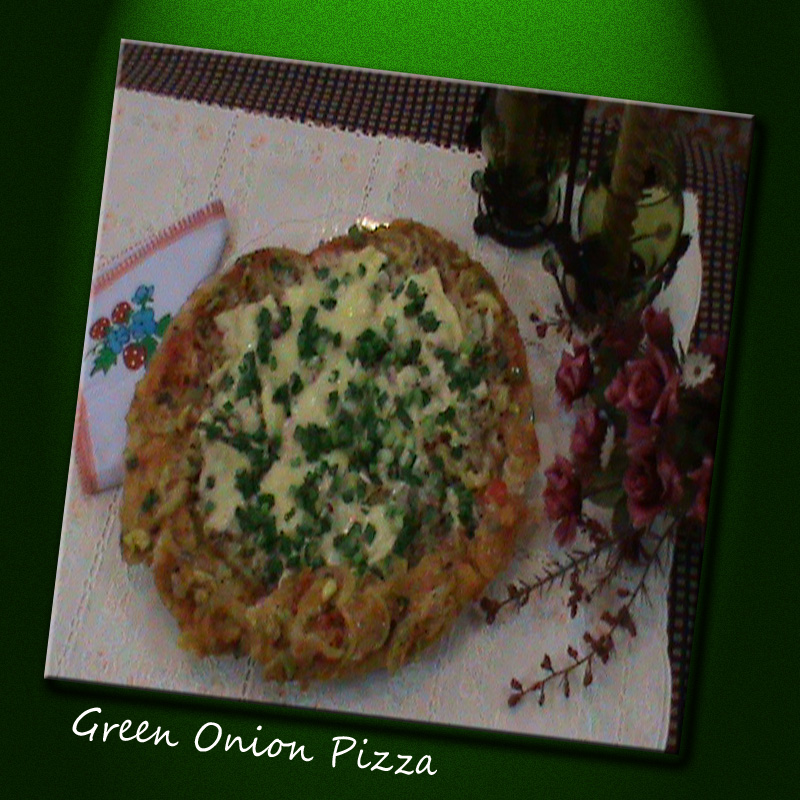
<style>
.page{position:relative;width:800px;height:800px}
.page>*{position:absolute;margin:0}
.t1{font:40.5px "SegoeScript";color:#fffdfd;scale:0.89 1}
</style>
<div class="page">
<p class="t1" style="left:72px;top:707px;width:365px;height:68px;rotate:6deg">Green Onion Pizza</p>
</div>
